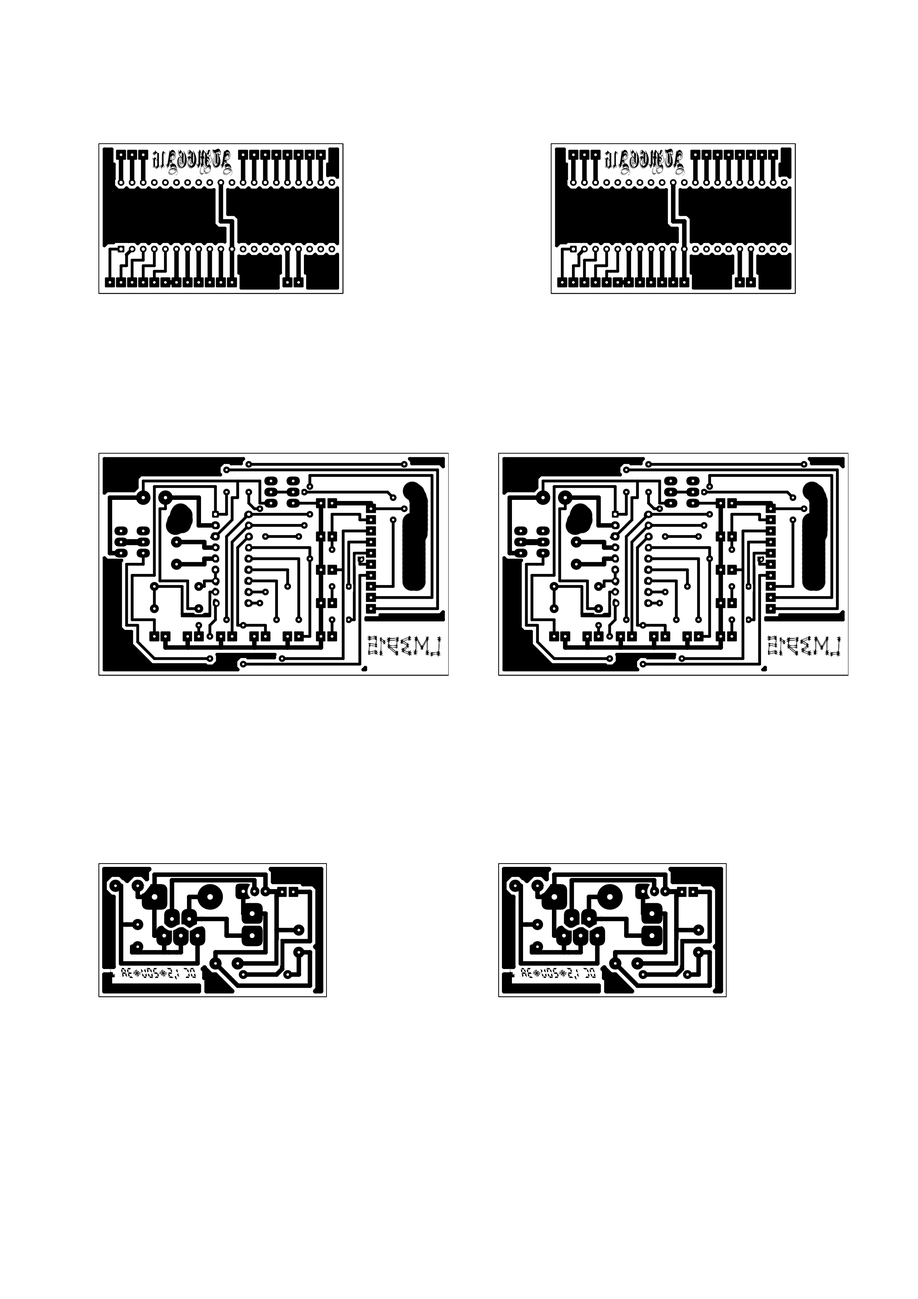
<style>
.page{position:relative;width:918px;height:1299px;background:#ffffff}
.page>*{position:absolute;margin:0}
.t1{font:20.3px "ShadowedBlack-Normal";color:#010000;scale:0.64 1}
.t2{font:10.7px "RadiolandSlim";color:#000000;scale:1.35 1}
</style>
<div class="page">
<p class="t1" style="left:152px;top:148px;width:81px;height:27px;rotate:180deg">ATMEGA16</p>
<p class="t1" style="left:605px;top:148px;width:80px;height:27px;rotate:180deg">ATMEGA16</p>
<p class="t2" style="left:121px;top:968px;width:75px;height:11px;rotate:180deg">DC 1,5-20V-3A</p>
<p class="t2" style="left:521px;top:968px;width:75px;height:11px;rotate:180deg">DC 1,5-20V-3A</p>
</div>
